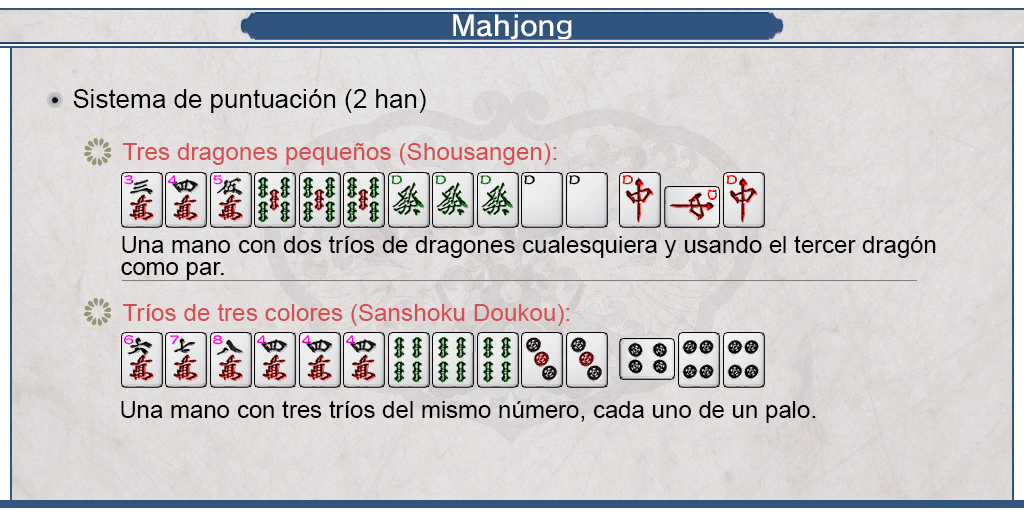
<style>
.page{position:relative;width:1024px;height:512px}
.page>*{position:absolute;margin:0}
.t1{font:26px "ArialMT";color:#000000}
.t2{font:24px "ArialMT";color:#d64d52}
.t3{font:24px/22px "ArialMT";color:#000000}
.t4{font:24px "ArialMT";color:#000000}
</style>
<div class="page">
<p class="t1" style="left:73px;top:89px;width:353px;height:24px">Sistema de puntuación (2 han)</p>
<p class="t2" style="left:122px;top:143px;width:435px;height:22px">Tres dragones pequeños (Shousangen):</p>
<p class="t3" style="left:121px;top:235px;width:815px;height:45px;text-align:justify">Una mano con dos tríos de dragones cualesquiera y usando el tercer dragón <br>como par.</p>
<p class="t2" style="left:122px;top:303px;width:448px;height:23px">Tríos de tres colores (Sanshoku Doukou):</p>
<p class="t4" style="left:121px;top:400px;width:695px;height:23px">Una mano con tres tríos del mismo número, cada uno de un palo.</p>
</div>
